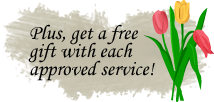
<style>
.page{position:relative;width:214px;height:102px;background:#ffffff}
.page>*{position:absolute;margin:0}
.t1{font:20.7px/18.1px "MonotypeCorsiva";color:#000000}
</style>
<div class="page">
<p class="t1" style="left:28px;top:24px;width:127px;height:57px">Plus, get a free<br>gift with each<br>approved service!</p>
</div>
